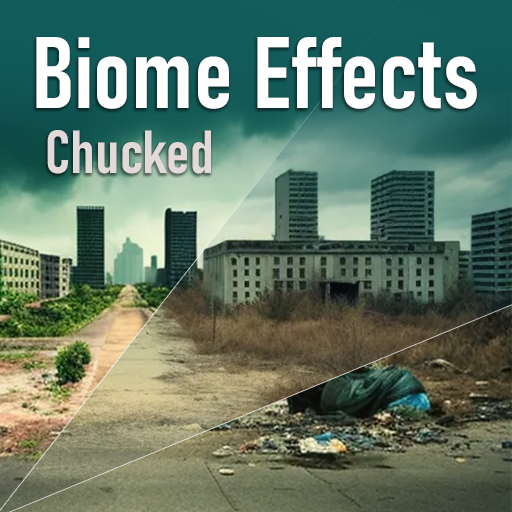
<style>
.page{position:relative;width:512px;height:512px}
.page>*{position:absolute;margin:0}
.t1{font:100px/65px "Bahnschrift-SemiBoldCondensed";color:#ffffff;font-weight:bold}
.t2{font:60px/65px "Bahnschrift-SemiBoldCondensed";color:#e2d9d9;font-weight:bold}
</style>
<div class="page">
<p class="t1" style="left:36px;top:37px;width:441px;height:137px;text-align:center">Biome Effects<br> <span class="t2">Chucked</span></p>
</div>
